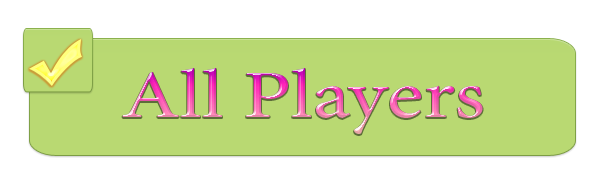
<style>
.page{position:relative;width:599px;height:193px;background:#ffffff}
.page>*{position:absolute;margin:0}
.t1{font:68.4px "";scale:1.25 1}
</style>
<div class="page">
<p class="t1" style="left:122px;top:68px;width:361px;height:66px">All Players</p>
</div>
